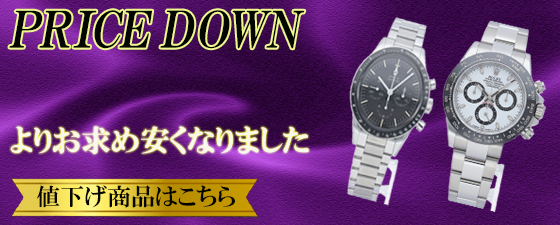
<style>
.page{position:relative;width:560px;height:225px}
.page>*{position:absolute;margin:0}
.t1{font:50px "HGPMinchoE";color:#060600;font-style:italic}
.t2{font:30px "HGPMinchoE";color:#f8f8ef}
.t3{font:24px "HGPMinchoE";color:#050500}
</style>
<div class="page">
<p class="t1" style="left:9px;top:10px;width:296px;height:39px">PRICE DOWN</p>
<p class="t2" style="left:10px;top:126px;width:299px;height:28px">よりお求め安くなりました</p>
<p class="t3" style="left:37px;top:185px;width:198px;height:23px">値下げ商品はこちら</p>
</div>
